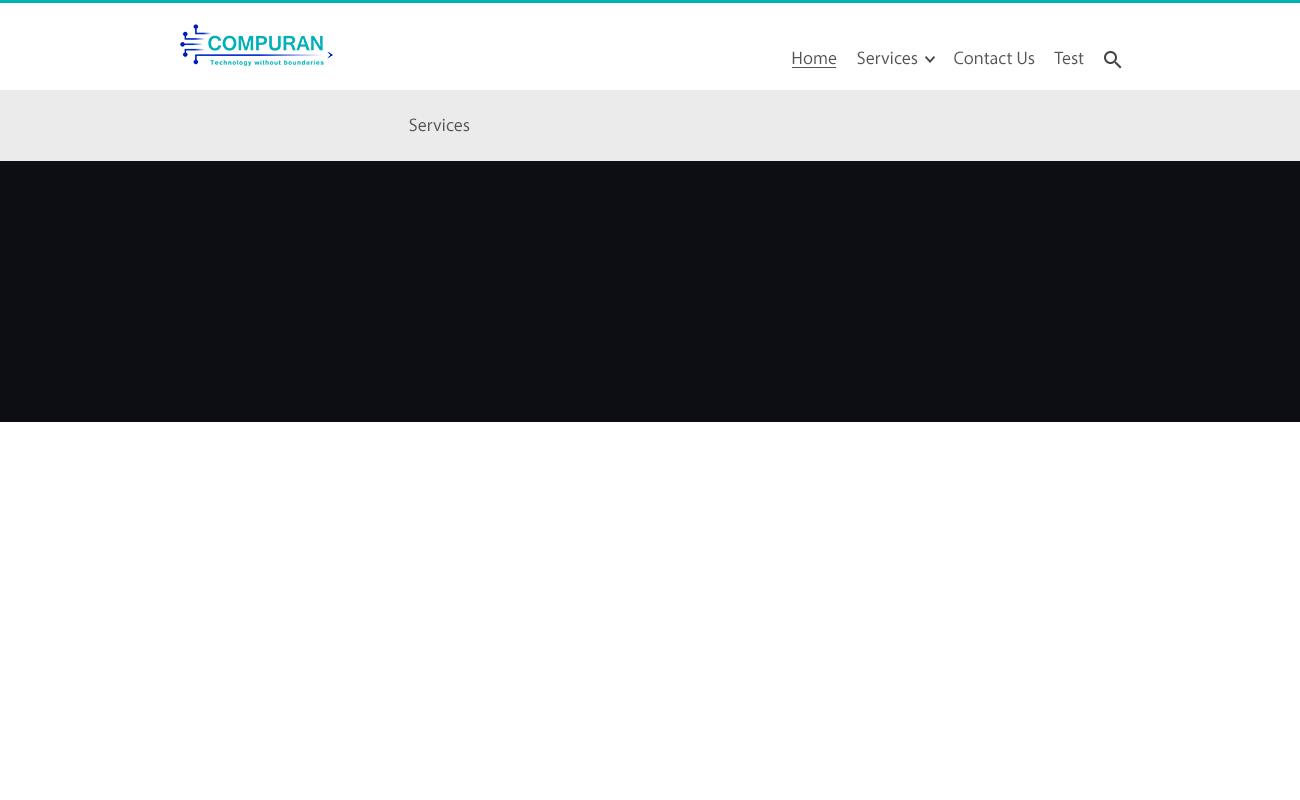
<style>
.page{position:relative;width:1300px;height:800px;background:#ffffff}
.page>*{position:absolute;margin:0}
.t1{font:18px "MyriadPro-Regular";color:#464646}
</style>
<div class="page">
<p class="t1" style="left:792px;top:51px;width:45px;height:14px">Home</p>
<p class="t1" style="left:857px;top:51px;width:61px;height:14px">Services</p>
<p class="t1" style="left:954px;top:51px;width:81px;height:14px">Contact Us</p>
<p class="t1" style="left:1054px;top:51px;width:30px;height:14px">Test</p>
<p class="t1" style="left:409px;top:118px;width:61px;height:14px">Services</p>
</div>
